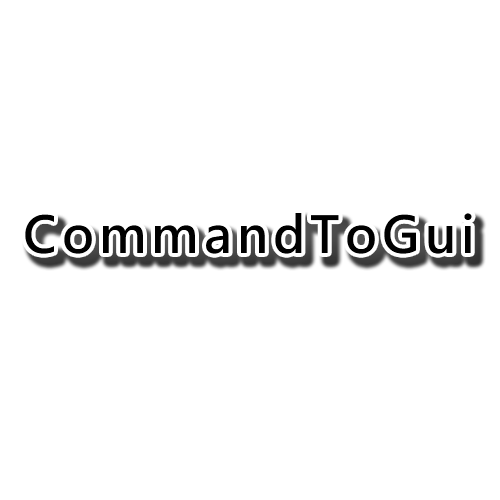
<style>
.page{position:relative;width:500px;height:500px;background:#ffffff}
.page>*{position:absolute;margin:0}
.t1{font:50px "MicrosoftJhengHeiBold";letter-spacing:0.1em;color:#000000}
</style>
<div class="page">
<p class="t1" style="left:25px;top:213px;width:447px;height:41px">CommandToGui</p>
</div>
